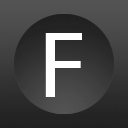
<style>
.page{position:relative;width:128px;height:128px}
.page>*{position:absolute;margin:0}
.t1{font:100px "Consolas";color:#ffffff}
</style>
<div class="page">
<p class="t1" style="left:45px;top:33px;width:37px;height:64px">F</p>
</div>
